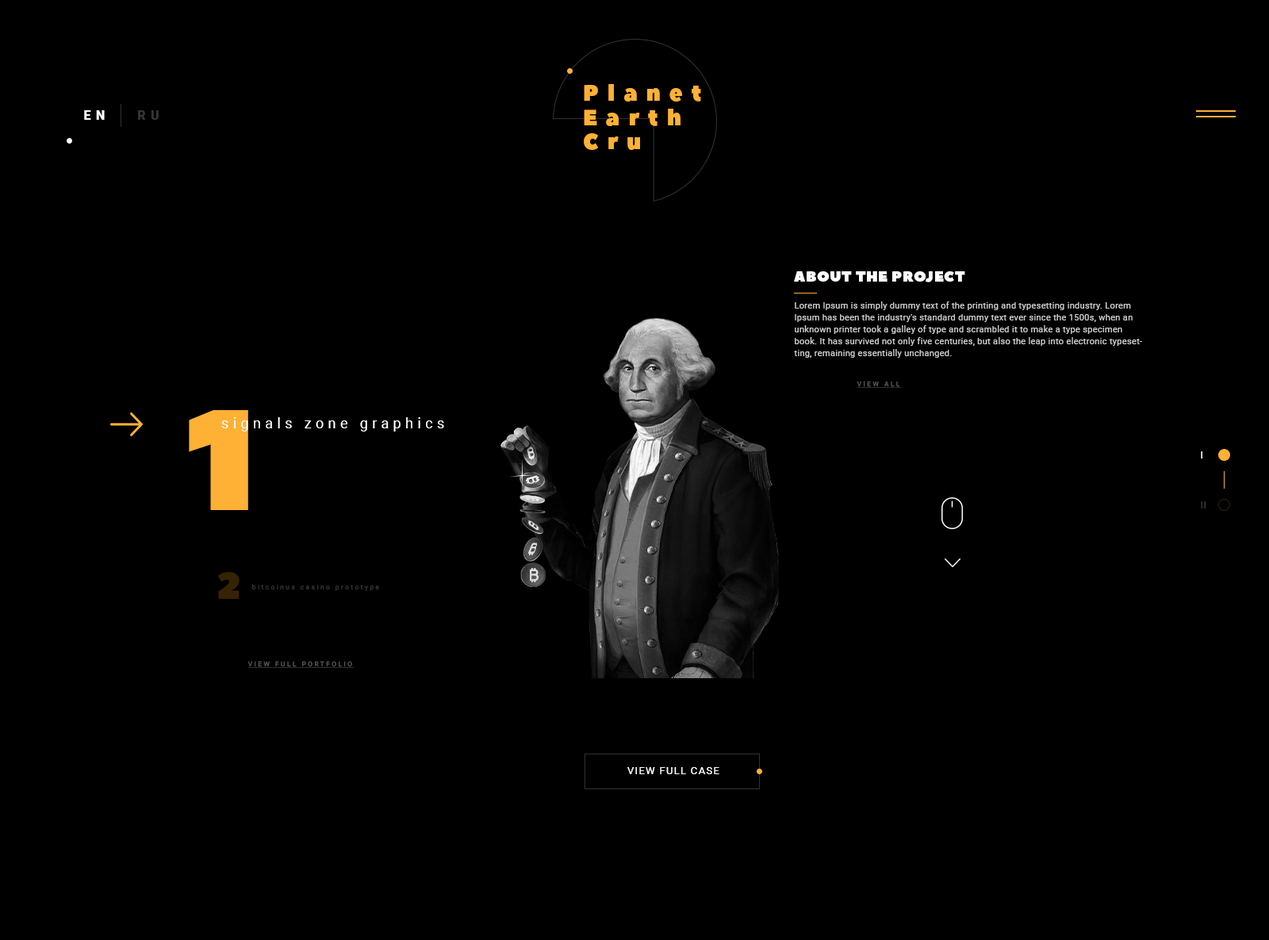
<style>
.page{position:relative;width:1269px;height:940px;background:#000000}
.page>*{position:absolute;margin:0}
.t1{font:22px/24px "PeaceSans";letter-spacing:0.4em;color:#ffb135}
.t2{font:12.7px "Roboto-Black";letter-spacing:0.4em;color:#ffffff}
.t3{font:12.7px "Roboto-Black";letter-spacing:0.4em;color:#363636}
.t4{font:14.7px "PeaceSans";letter-spacing:0.03em;color:#ffffff}
.t5{font:8.7px/11.9px "Roboto-Regular";letter-spacing:0.03em;color:#cbcbcb}
.t6{font:6.6px "Roboto-Regular";letter-spacing:0.3em;text-decoration:underline}
.t7{font:143.3px "PeaceSans";letter-spacing:0.02em;color:#ffb135}
.t8{font:14.3px "Roboto-Regular";letter-spacing:0.3em;color:#ffffff}
.t9{font:10.6px "Roboto-Regular";letter-spacing:0.02em;color:#ffffff}
.t10{font:10.6px "Roboto-Regular";letter-spacing:0.02em;color:#363636}
.t11{font:37.6px "PeaceSans";letter-spacing:0.02em;color:#362204}
.t12{font:6.6px "Roboto-Regular";letter-spacing:0.3em}
.t13{font:10.3px "Roboto-Regular";letter-spacing:0.1em;color:#ffffff;text-transform:uppercase}
</style>
<div class="page">
<p class="t1" style="left:584px;top:84px;width:117px;height:66px">Planet<br>Earth<br>Cru</p>
<p class="t2" style="left:84px;top:110px;width:21px;height:10px">EN</p>
<p class="t3" style="left:138px;top:110px;width:21px;height:10px">RU</p>
<p class="t4" style="left:794px;top:271px;width:171px;height:11px">ABOUT THE PROJECT</p>
<p class="t5" style="left:794px;top:301px;width:348px;height:57px">Lorem Ipsum is simply dummy text of the printing and typesetting industry. Lorem Ipsum has been the industry's standard dummy text ever since the 1500s, when an unknown printer took a galley of type and scrambled it to make a type specimen book. It has survived not only five centuries, but also the leap into electronic typesetting, remaining essentially unchanged.</p>
<p class="t6" style="left:856px;top:381px;width:46px;height:7px">VIEW ALL</p>
<p class="t7" style="left:189px;top:410px;width:59px;height:100px">1</p>
<p class="t8" style="left:221px;top:417px;width:223px;height:14px">signals zone graphics</p>
<p class="t9" style="left:1201px;top:451px;width:1px;height:7px">I</p>
<p class="t10" style="left:1201px;top:501px;width:1px;height:7px">I</p>
<p class="t10" style="left:1204px;top:501px;width:1px;height:7px">I</p>
<p class="t11" style="left:218px;top:572px;width:21px;height:27px">2</p>
<p class="t12" style="left:252px;top:584px;width:127px;height:7px">bitcoinus casino prototype</p>
<p class="t6" style="left:247px;top:661px;width:107px;height:7px">VIEW FULL PORTFOLIO</p>
<p class="t13" style="left:627px;top:767px;width:92px;height:7px">view full case</p>
</div>
